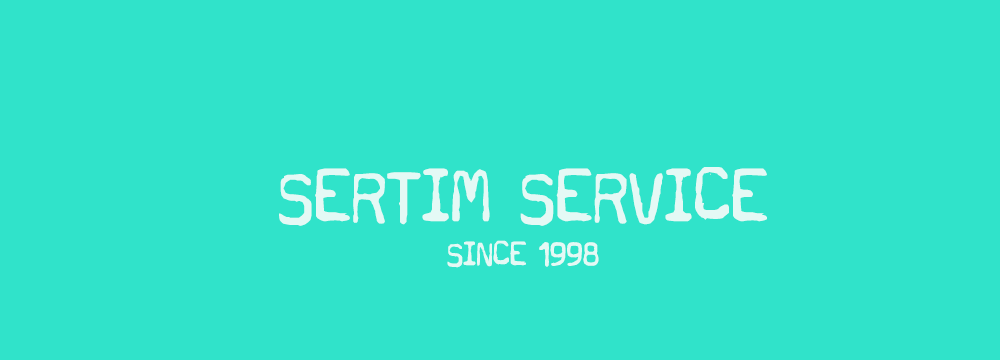
<style>
.page{position:relative;width:1000px;height:360px;background:#30e3ca}
.page>*{position:absolute;margin:0}
.t1{font:80px "Typewriter-a602(deadpostman2004)";color:#e4f9f5}
.t2{font:36px "Typewriter-a602(deadpostman2004)";color:#e4f9f5}
</style>
<div class="page">
<p class="t1" style="left:279px;top:167px;width:488px;height:101px;text-align:center">SERTIM SERVICE<br><span class="t2">SINCE 1998</span></p>
</div>
